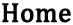
<style>
.page{position:relative;width:73px;height:25px;background:#ffffff}
.page>*{position:absolute;margin:0}
.t1{font:27px "Cambria";color:#000000;font-weight:bold}
</style>
<div class="page">
<p class="t1" style="left:2px;top:3px;width:69px;height:20px">Home</p>
</div>
